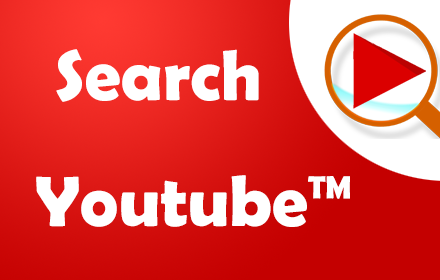
<style>
.page{position:relative;width:440px;height:280px}
.page>*{position:absolute;margin:0}
.t1{font:72px "BerlinSansFBDemi-Bold";color:#ffffff}
</style>
<div class="page">
<p class="t1" style="left:36px;top:49px;width:314px;height:178px;text-align:center">Search<br>    Youtube™</p>
</div>
